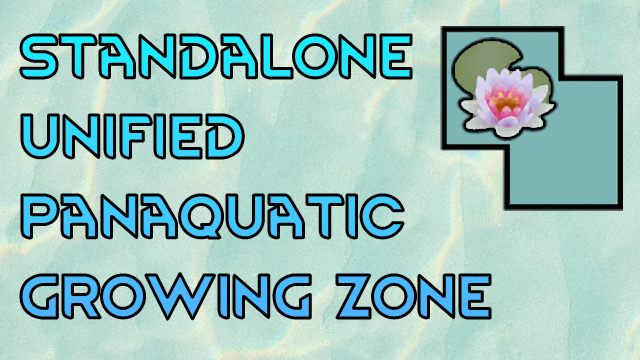
<style>
.page{position:relative;width:640px;height:360px}
.page>*{position:absolute;margin:0}
.t1{font:52px/80px "RimWordFont"}
</style>
<div class="page">
<p class="t1" style="left:21px;top:35px;width:469px;height:285px">Standalone<br>Unified<br>Panaquatic<br>Growing zone</p>
</div>
